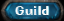
<style>
.page{position:relative;width:64px;height:21px}
.page>*{position:absolute;margin:0}
.t1{font:12.8px "BritannicBold";scale:1.19 1}
</style>
<div class="page">
<p class="t1" style="left:15px;top:6px;width:34px;height:9px">Guild</p>
</div>
